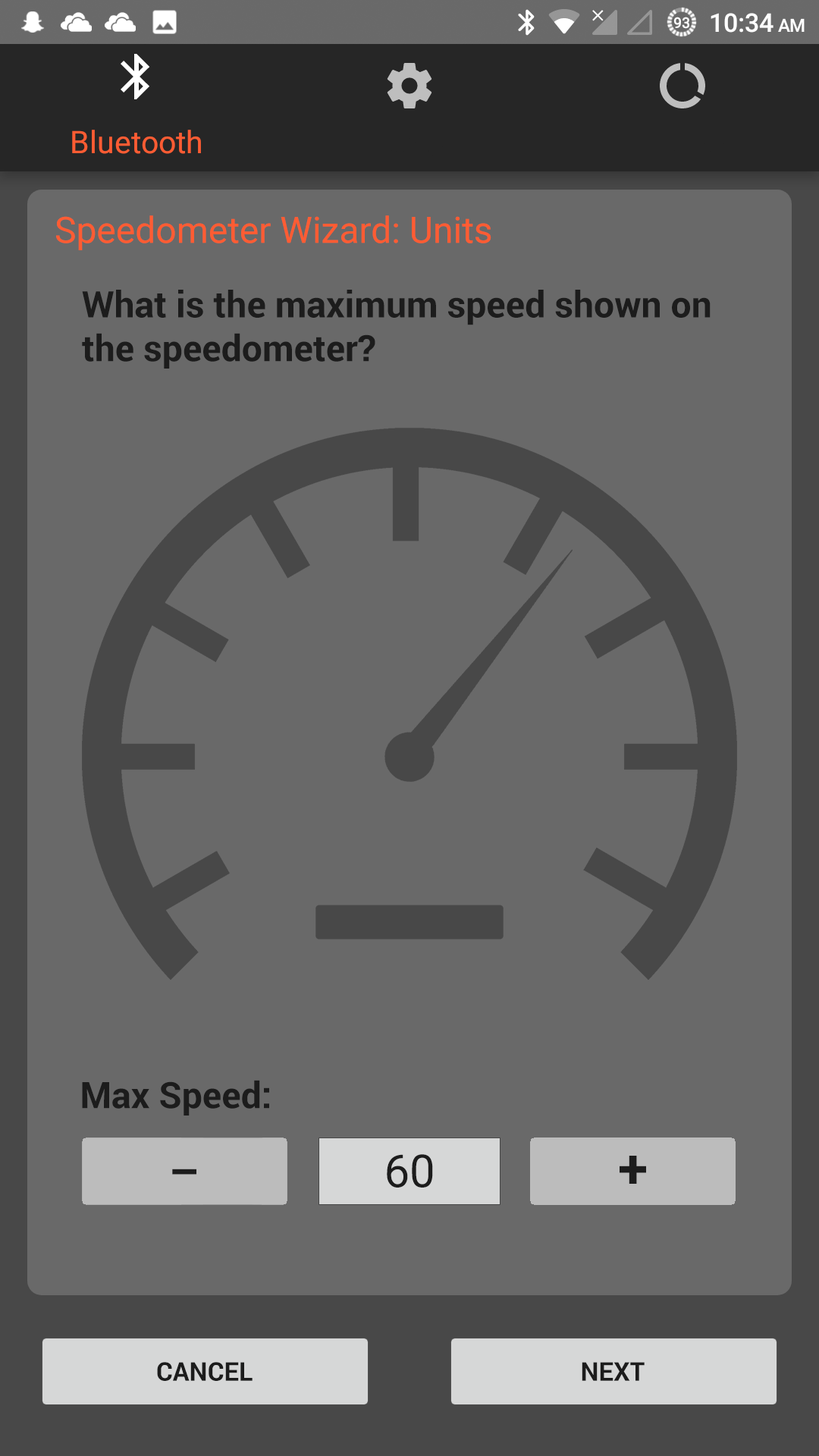
<style>
.page{position:relative;width:819px;height:1456px;background:#696969}
.page>*{position:absolute;margin:0}
.t1{font:36.4px "Roboto-Regular";color:#ff5c33}
.t2{font:36.4px "Roboto-Bold";color:#1c1c1c}
.t3{font:45.5px "Roboto-Regular";color:#1c1c1c}
.t4{font:54.6px "Roboto-Bold";color:#1c1c1c}
.t5{font:45.5px "Roboto-Bold";color:#1c1c1c}
.t6{font:25.8px "Roboto-Bold";color:#1c1c1c}
</style>
<div class="page">
<p class="t1" style="left:56px;top:215px;width:435px;height:35px">Speedometer Wizard: Units</p>
<p class="t2" style="left:82px;top:290px;width:629px;height:79px">What is the maximum speed shown on<br>the speedometer?</p>
<p class="t2" style="left:82px;top:1080px;width:187px;height:35px">Max Speed:</p>
<p class="t3" style="left:387px;top:1154px;width:46px;height:34px">60</p>
<p class="t4" style="left:620px;top:1156px;width:26px;height:28px">+</p>
<p class="t5" style="left:172px;top:1169px;width:24px;height:6px">–</p>
<p class="t6" style="left:157px;top:1362px;width:96px;height:19px">CANCEL</p>
<p class="t6" style="left:582px;top:1362px;width:63px;height:19px">NEXT</p>
</div>
